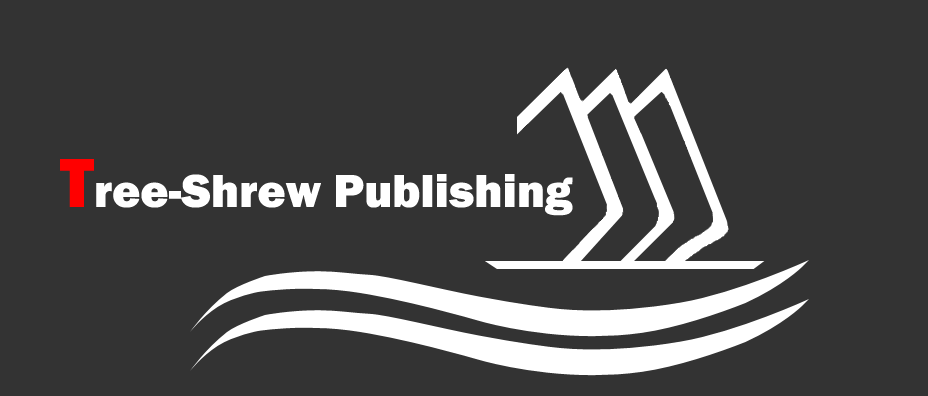
<style>
.page{position:relative;width:928px;height:396px;background:#333333}
.page>*{position:absolute;margin:0}
.t1{font:48px "FranklinGothic-Heavy";color:#ffffff}
.t2{font:72px "FranklinGothic-Heavy";color:#ff0000}
</style>
<div class="page">
<p class="t1" style="left:60px;top:159px;width:513px;height:57px"><span class="t2">T</span>ree-Shrew Publishing</p>
</div>
